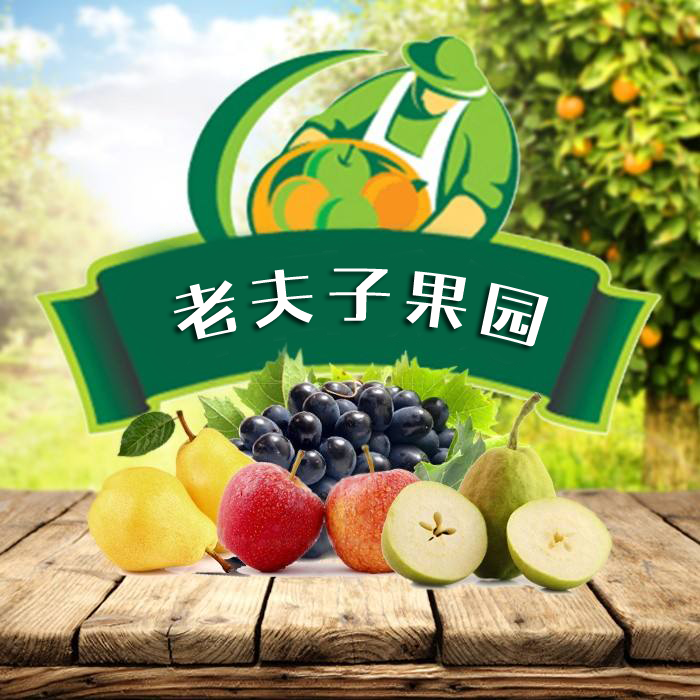
<style>
.page{position:relative;width:700px;height:700px}
.page>*{position:absolute;margin:0}
.t1{font:60px "Benmo-Chenhei";letter-spacing:0.2em;color:#fefdfd}
</style>
<div class="page">
<p class="t1" style="left:173px;top:268px;width:376px;height:79px;rotate:1deg">老夫子果园</p>
</div>
